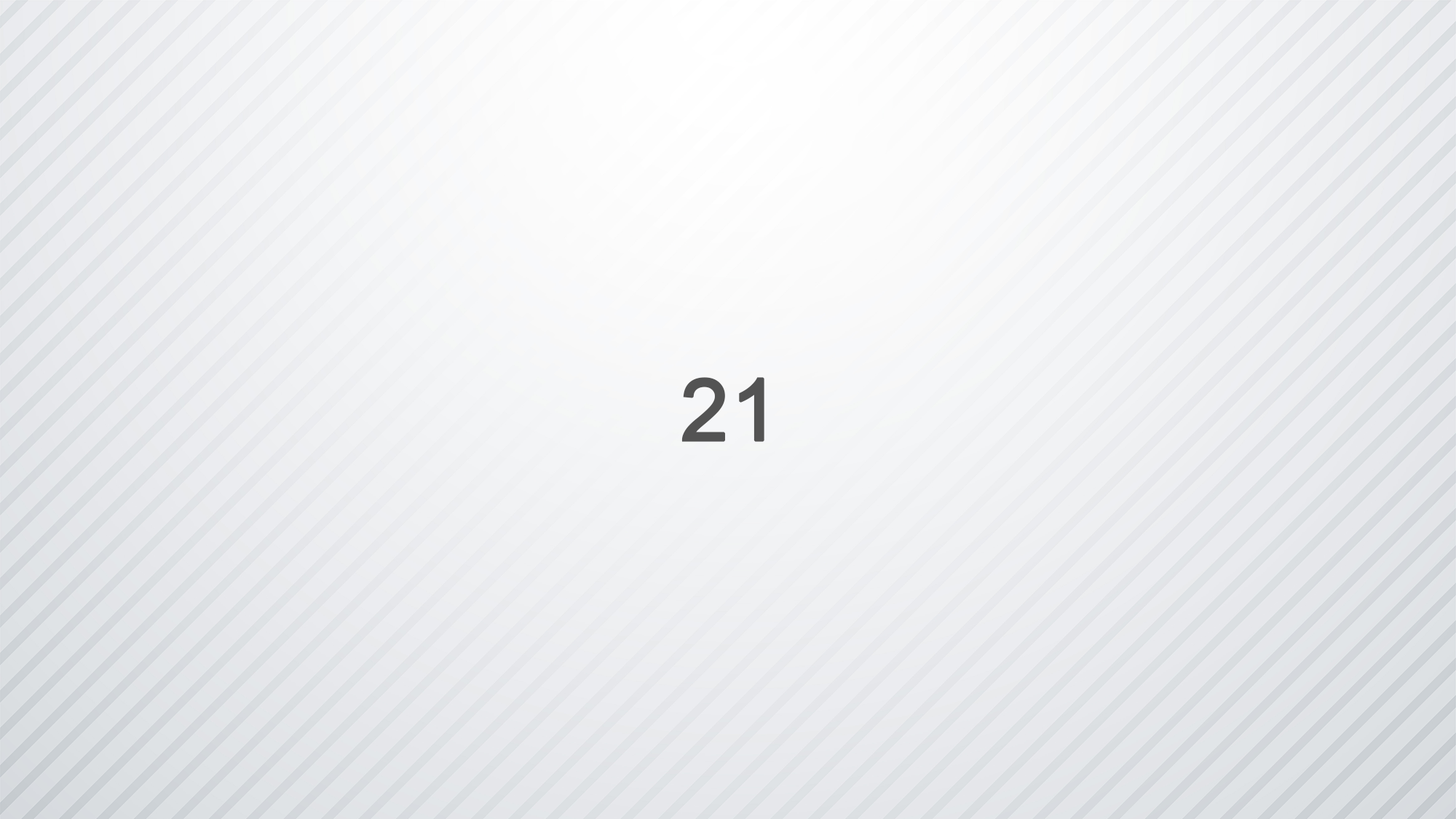
<style>
.page{position:relative;width:1456px;height:819px}
.page>*{position:absolute;margin:0}
.t1{font:86px "ArialMT";color:#535353;font-weight:bold}
</style>
<div class="page">
<p class="t1" style="left:681px;top:377px;width:83px;height:65px">21</p>
</div>
